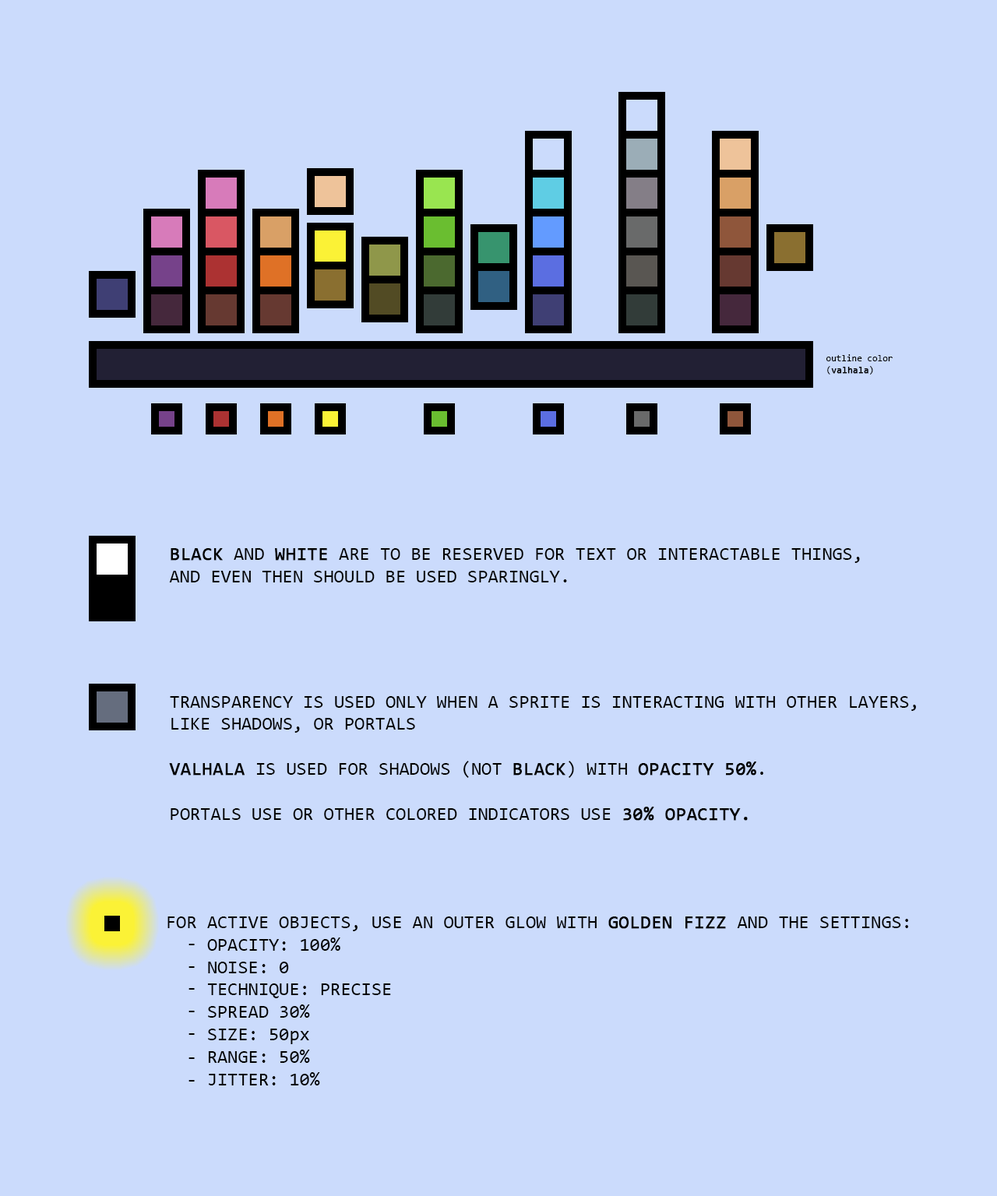
<style>
.page{position:relative;width:997px;height:1196px;background:#cbdbfc}
.page>*{position:absolute;margin:0}
.t1{font:9.3px "Consolas";color:#000000}
.t2{font:9.3px "Consolas";color:#000000;font-weight:bold}
.t3{font:18.7px "Consolas";color:#000000;text-transform:uppercase}
.t4{font:18.7px "Consolas";color:#000000;text-transform:uppercase;font-weight:bold}
.t5{font:18.7px "Consolas";color:#000000}
.t6{font:18.7px "Consolas";color:#000000;font-weight:bold}
</style>
<div class="page">
<p class="t1" style="left:826px;top:354px;width:66px;height:21px">outline color<br>(<span class="t2">valhala</span>)</p>
<p class="t3" style="left:169px;top:548px;width:691px;height:35px"><span class="t4">Black</span> and <span class="t4">White</span> are to be reserved for text or interactable things,<br>and EVEN THEN should be used sparingly.</p>
<p class="t3" style="left:169px;top:696px;width:747px;height:125px">Transparency IS USED only when A SPRITE is interacting with other layers,<br>like shadows, or portals<br><br><span class="t4">Valhala</span> is used for Shadows (not <span class="t4">black</span>) with <span class="t4">OPACITY 50%</span>.<br><br>PORTALS USE OR OTHER COLORED INDICATORS USE <span class="t4">30% OPACITY.</span></p>
<p class="t3" style="left:167px;top:917px;width:741px;height:169px"><span class="t5">FOR ACTIVE OBJECTS, USE AN OUTER GLOW WITH </span><span class="t6">GOLDEN FIZZ </span><span class="t5">AND THE SETTINGS:</span> <br>  - OPACITY: 100%<br>  - nOISE: 0<br>  - tECHNIQUE: pRECISE<br>  - sPREAD 30%<br>  - SIZE: 50<span class="t5">px<br>  - RANGE: 50%<br>  - JITTER: 10%</span></p>
</div>
